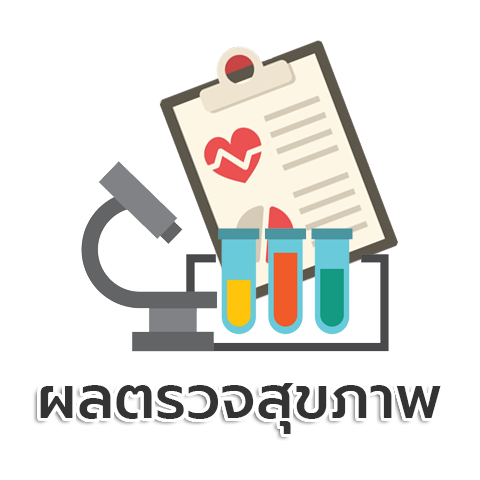
<style>
.page{position:relative;width:480px;height:480px;background:#ffffff}
.page>*{position:absolute;margin:0}
.t1{font:60px "Prompt-Medium";color:#333333}
</style>
<div class="page">
<p class="t1" style="left:40px;top:383px;width:401px;height:51px">ผลตรวจสุขภาพ</p>
</div>
